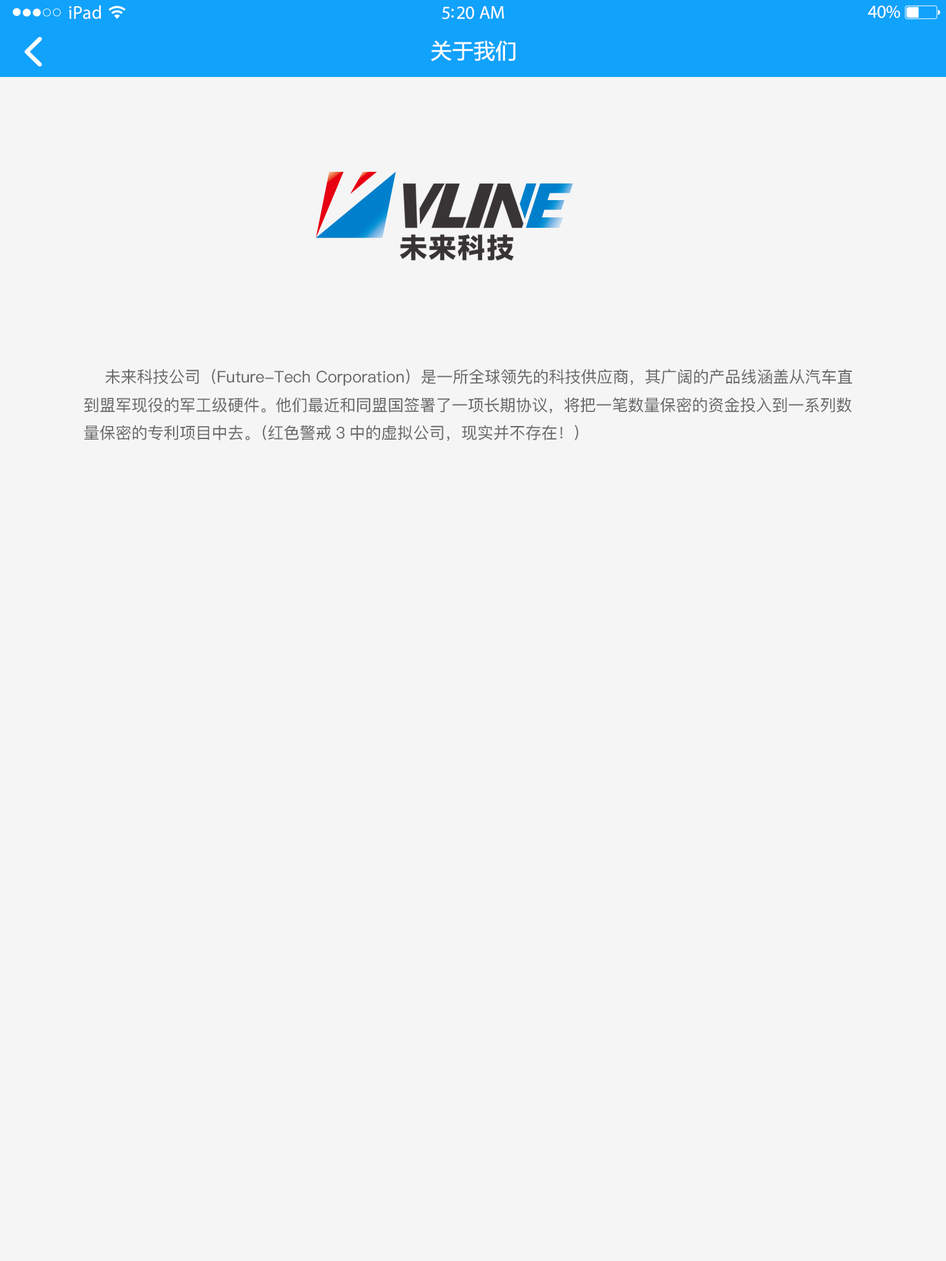
<style>
.page{position:relative;width:946px;height:1261px;background:#f5f5f5}
.page>*{position:absolute;margin:0}
.t1{font:18.5px "MyriadPro-Regular";letter-spacing:0.02em;color:#ffffff}
.t2{font:18.5px "MyriadPro-Regular";letter-spacing:-0.02em;color:#ffffff}
.t3{font:20.9px "MicrosoftYaHei";color:#ffffff;font-weight:bold}
.t4{font:16px "PingFang-SC-Medium";color:#666666}
</style>
<div class="page">
<p class="t1" style="left:69px;top:5px;width:32px;height:14px">iPad</p>
<p class="t2" style="left:867px;top:6px;width:33px;height:12px">40%</p>
<p class="t2" style="left:442px;top:6px;width:62px;height:13px">5:20 AM</p>
<p class="t3" style="left:431px;top:41px;width:84px;height:20px">关于我们</p>
<p class="t4" style="left:84px;top:369px;width:768px;height:72px">未来科技公司（Future-Tech Corporation）是一所全球领先的科技供应商，其广阔的产品线涵盖从汽车直到盟军现役的军工级硬件。他们最近和同盟国签署了一项长期协议，将把一笔数量保密的资金投入到一系列数量保密的专利项目中去。（红色警戒3中的虚拟公司，现实并不存在！）</p>
</div>
